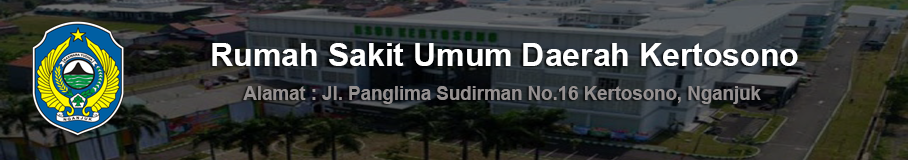
<style>
.page{position:relative;width:908px;height:160px}
.page>*{position:absolute;margin:0}
.t1{font:32px "Arial-BoldMT";color:#ffffff}
.t2{font:18.7px "Arial-BoldMT";color:#959090}
</style>
<div class="page">
<p class="t1" style="left:212px;top:43px;width:586px;height:23px">Rumah Sakit Umum Daerah Kertosono</p>
<p class="t2" style="left:243px;top:86px;width:518px;height:18px">Alamat : Jl. Panglima Sudirman No.16 Kertosono, Nganjuk</p>
</div>
